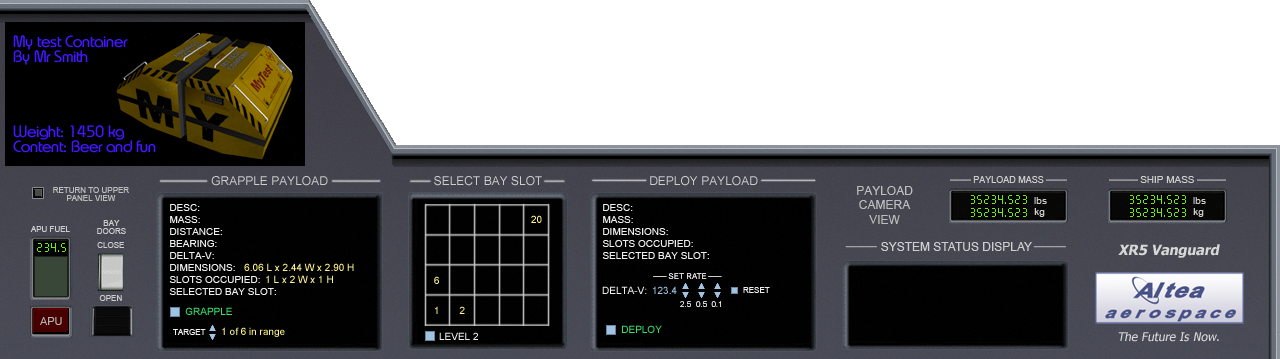
<style>
.page{position:relative;width:1280px;height:359px;background:#ffffff}
.page>*{position:absolute;margin:0}
.t1{font:12px "ArialMT";color:#cfcecf}
.t2{font:8px/8px "ArialMT";color:#bcbcbc;font-variant:small-caps}
.t3{font:12px "ArialMT";color:#bdbdbd}
.t4{font:10px/12px "ArialMT";color:#eeeeee}
.t5{font:10px "ArialMT";color:#fbf28a}
.t6{font:14px "Tahoma-Bold";color:#d7d7d7;font-style:italic}
.t7{font:10px "ArialMT";color:#eeeeee}
.t8{font:10px "ArialMT";color:#9fc3e3}
.t9{font:8px "ArialMT";color:#eeeeee;font-variant:small-caps}
.t10{font:10px "ArialMT";color:#35de69}
.t11{font:10px "ArialMT"}
.t12{font:12px "Tahoma";color:#d7d7d7;font-style:italic}
</style>
<div class="page">
<p class="t1" style="left:211px;top:176px;width:117px;height:10px">GRAPPLE PAYLOAD</p>
<p class="t1" style="left:434px;top:176px;width:108px;height:10px">SELECT BAY SLOT</p>
<p class="t1" style="left:650px;top:176px;width:108px;height:10px">DEPLOY PAYLOAD</p>
<p class="t2" style="left:53px;top:187px;width:76px;height:14px;text-align:center">RETURN TO UPPER <br>PANEL VIEW</p>
<p class="t3" style="left:857px;top:186px;width:56px;height:38px;text-align:center">PAYLOAD CAMERA VIEW</p>
<p class="t4" style="left:169px;top:204px;width:107px;height:91px">DESC:<br>MASS:<br>DISTANCE: <br>BEARING:<br>DELTA-V:<br>DIMENSIONS:<br>SLOTS OCCUPIED:<br>SELECTED BAY SLOT:</p>
<p class="t4" style="left:602px;top:204px;width:107px;height:55px">DESC:<br>MASS:<br>DIMENSIONS:<br>SLOTS OCCUPIED:<br>SELECTED BAY SLOT:</p>
<p class="t5" style="left:531px;top:215px;width:11px;height:8px">20</p>
<p class="t6" style="left:1118px;top:244px;width:102px;height:14px">XR5 Vanguard</p>
<p class="t5" style="left:244px;top:263px;width:110px;height:8px">6.06 L x 2.44 W x 2.90 H</p>
<p class="t5" style="left:266px;top:275px;width:67px;height:8px">1 L x 2 W x 1 H</p>
<p class="t5" style="left:434px;top:276px;width:5px;height:8px">6</p>
<p class="t7" style="left:602px;top:286px;width:45px;height:8px">DELTA-V:</p>
<p class="t8" style="left:653px;top:286px;width:24px;height:8px">123.4</p>
<p class="t9" style="left:743px;top:287px;width:27px;height:6px">RESET</p>
<p class="t10" style="left:185px;top:307px;width:47px;height:8px">GRAPPLE</p>
<p class="t11" style="left:435px;top:306px;width:3px;height:8px">1</p>
<p class="t5" style="left:459px;top:306px;width:6px;height:8px">2</p>
<p class="t9" style="left:173px;top:329px;width:33px;height:6px">TARGET</p>
<p class="t5" style="left:222px;top:327px;width:63px;height:10px">1 of 6 in range</p>
<p class="t10" style="left:622px;top:325px;width:40px;height:8px">DEPLOY</p>
<p class="t7" style="left:439px;top:332px;width:39px;height:8px">LEVEL 2</p>
<p class="t12" style="left:1118px;top:332px;width:101px;height:10px">The Future Is Now.</p>
</div>
